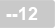
<style>
.page{position:relative;width:55px;height:28px;background:#c9c9c9}
.page>*{position:absolute;margin:0}
.t1{font:18.2px "Arial-BoldMT";color:#ffffff}
</style>
<div class="page">
<p class="t1" style="left:6px;top:7px;width:32px;height:13px">--12</p>
</div>
